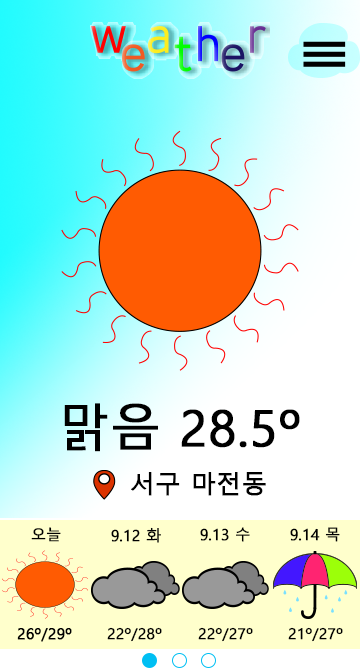
<style>
.page{position:relative;width:360px;height:670px}
.page>*{position:absolute;margin:0}
.t1{font:50px "MalgunGothic";color:#000000;font-weight:bold}
.t2{font:25px "MalgunGothic";color:#000000;font-weight:bold}
.t3{font:15.1px "MalgunGothic";color:#000000;font-weight:bold}
.t4{font:15px "MalgunGothic";color:#000000;font-weight:bold}
</style>
<div class="page">
<p class="t1" style="left:64px;top:403px;width:236px;height:49px">맑음 28.5º</p>
<p class="t2" style="left:131px;top:472px;width:135px;height:24px">서구 마전동</p>
<p class="t3" style="left:31px;top:527px;width:30px;height:15px">오늘</p>
<p class="t3" style="left:111px;top:527px;width:50px;height:16px">9.12 화</p>
<p class="t3" style="left:200px;top:527px;width:50px;height:15px">9.13 수</p>
<p class="t3" style="left:290px;top:527px;width:50px;height:15px">9.14 목</p>
<p class="t4" style="left:17px;top:628px;width:55px;height:14px">26º/29º</p>
<p class="t3" style="left:107px;top:627px;width:55px;height:15px">22º/28º</p>
<p class="t3" style="left:198px;top:627px;width:55px;height:15px">22º/27º</p>
<p class="t3" style="left:288px;top:627px;width:55px;height:15px">21º/27º</p>
</div>
